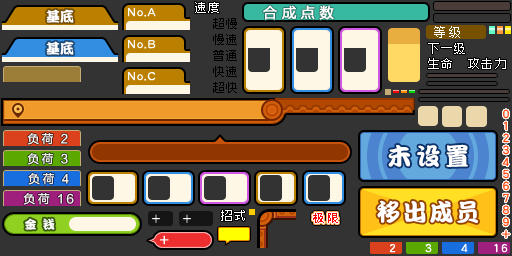
<style>
.page{position:relative;width:512px;height:256px;background:#333333}
.page>*{position:absolute;margin:0}
.t1{font:12px "ZpixEX2";letter-spacing:0.1em;color:#ffffff}
.t2{font:14px "MicrosoftYaHei";color:#ffffff;font-weight:bold}
.t3{font:14px "DFPKanTingLiuW9";color:#ffffff}
.t4{font:12px "ZpixEX2";letter-spacing:0.1em;color:#000000}
.t5{font:12px "FZXS12--GB1-0";letter-spacing:0.2em;color:#ffffff}
.t6{font:12px "ZpixEX2";letter-spacing:0.2em;color:#ffffff}
.t7{font:24px "DFPKanTingLiuW9";letter-spacing:0.2em;color:#ffffff}
.t8{font:24px "DFPKanTingLiuW9";letter-spacing:0.1em;color:#ffffff}
.t9{font:12px "DFPKanTingLiuW9";letter-spacing:0.1em;color:#ffffff}
.t10{font:11px "MicrosoftYaHei";color:#ff0000}
</style>
<div class="page">
<p class="t1" style="left:195px;top:2px;width:24px;height:11px">速度</p>
<p class="t2" style="left:263px;top:5px;width:71px;height:15px">合 成 点 数</p>
<p class="t3" style="left:46px;top:9px;width:28px;height:14px">基底</p>
<p class="t4" style="left:213px;top:18px;width:24px;height:11px">超慢</p>
<p class="t5" style="left:434px;top:26px;width:26px;height:12px">等级</p>
<p class="t3" style="left:46px;top:41px;width:28px;height:14px">基底</p>
<p class="t4" style="left:213px;top:34px;width:24px;height:11px">慢速</p>
<p class="t4" style="left:213px;top:50px;width:24px;height:11px">普通</p>
<p class="t1" style="left:428px;top:43px;width:37px;height:11px">下一级</p>
<p class="t1" style="left:428px;top:58px;width:24px;height:11px">生命</p>
<p class="t1" style="left:468px;top:58px;width:38px;height:11px">攻击力</p>
<p class="t4" style="left:213px;top:66px;width:24px;height:11px">快速</p>
<p class="t4" style="left:213px;top:82px;width:24px;height:11px">超快</p>
<p class="t6" style="left:27px;top:132px;width:41px;height:13px">负荷 2</p>
<p class="t7" style="left:388px;top:144px;width:80px;height:23px">未设置</p>
<p class="t6" style="left:27px;top:152px;width:41px;height:13px">负荷 3</p>
<p class="t6" style="left:28px;top:172px;width:41px;height:13px">负荷 4</p>
<p class="t6" style="left:23px;top:192px;width:51px;height:13px">负荷 16</p>
<p class="t8" style="left:377px;top:200px;width:101px;height:23px">移出成员</p>
<p class="t9" style="left:25px;top:218px;width:30px;height:12px">金 钱</p>
<p class="t1" style="left:221px;top:210px;width:24px;height:11px">招式</p>
<p class="t10" style="left:313px;top:213px;width:25px;height:10px">极 限</p>
</div>
